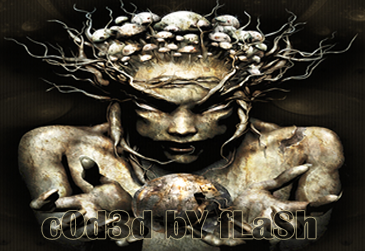
<style>
.page{position:relative;width:365px;height:251px}
.page>*{position:absolute;margin:0}
.t1{font:40px "BritannicBold"}
</style>
<div class="page">
<p class="t1" style="left:42px;top:210px;width:274px;height:29px">c0d3d bY fLaSh</p>
</div>
